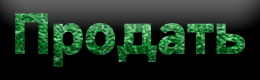
<style>
.page{position:relative;width:260px;height:80px;background:#000000}
.page>*{position:absolute;margin:0}
.t1{font:50px "MiSans-Heavy"}
</style>
<div class="page">
<p class="t1" style="left:15px;top:13px;width:230px;height:54px">Продать</p>
</div>
